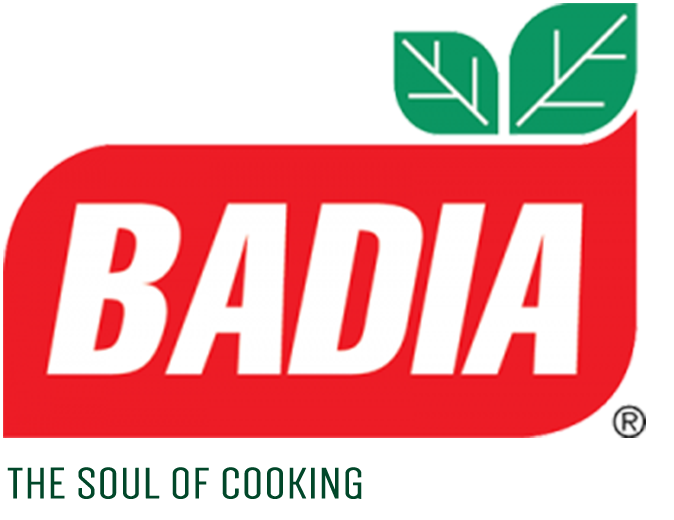
<style>
.page{position:relative;width:674px;height:520px;background:#ffffff}
.page>*{position:absolute;margin:0}
.t1{font:44.9px "Dense-Regular";color:#014729;text-transform:uppercase;font-weight:bold;scale:1.33 1}
</style>
<div class="page">
<p class="t1" style="left:7px;top:467px;width:355px;height:32px">the soul of cooking</p>
</div>
